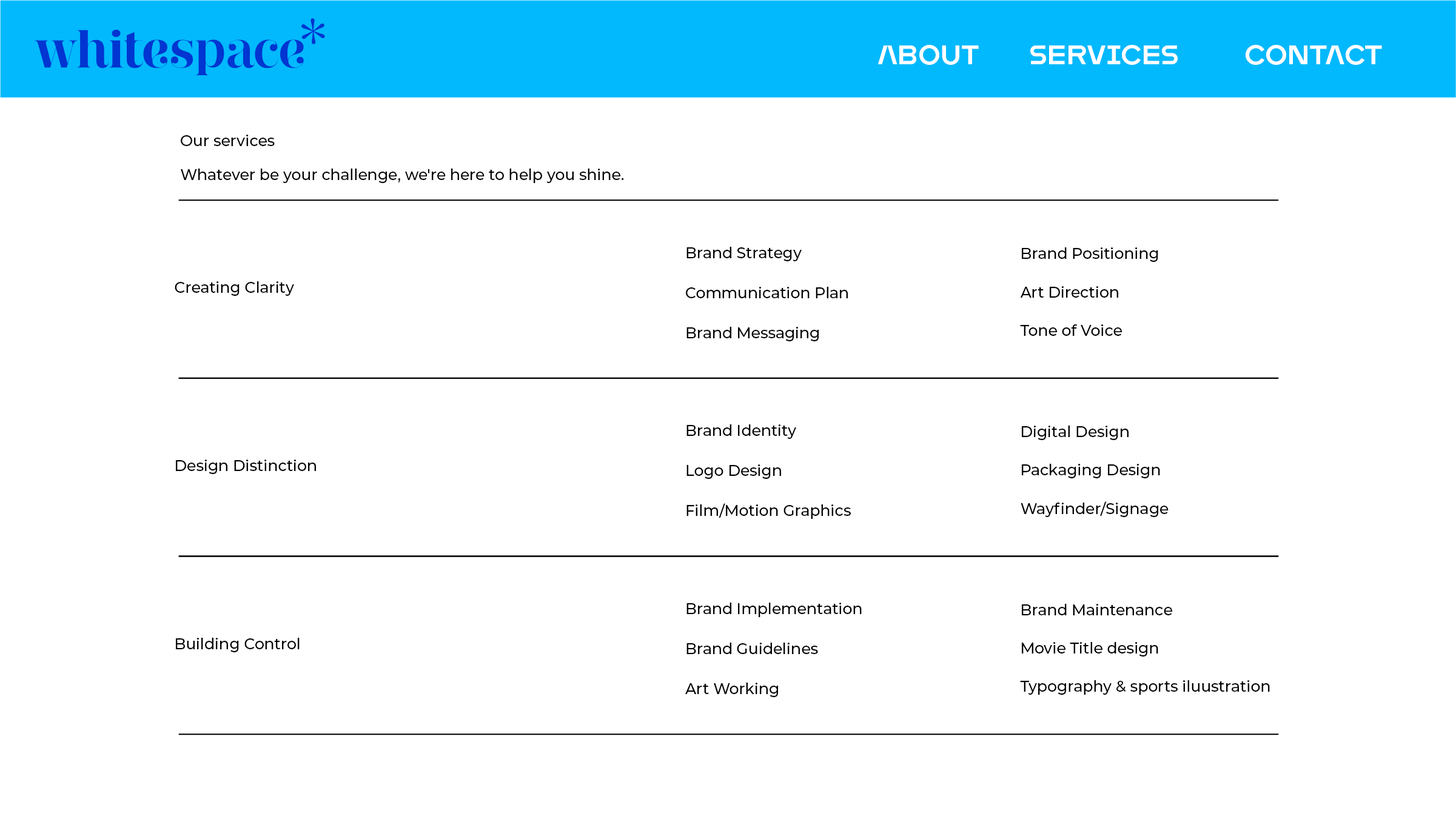
<style>
.page{position:relative;width:1456px;height:819px;background:#ffffff}
.page>*{position:absolute;margin:0}
.t1{font:27.2px "MonopolTRIAL-Regular";color:#ffffff}
.t2{font:15.2px/34.1px "Montserrat-Medium";color:#000000}
.t3{font:15.2px "Montserrat-Medium";color:#000000}
</style>
<div class="page">
<p class="t1" style="left:878px;top:45px;width:101px;height:20px">About</p>
<p class="t1" style="left:1030px;top:45px;width:147px;height:20px">Services</p>
<p class="t1" style="left:1245px;top:45px;width:137px;height:20px">Contact</p>
<p class="t2" style="left:181px;top:135px;width:443px;height:48px">Our services<br>Whatever be your challenge, we're here to help you shine.</p>
<p class="t3" style="left:686px;top:247px;width:116px;height:14px">Brand Strategy</p>
<p class="t3" style="left:1022px;top:247px;width:136px;height:15px">Brand Positioning</p>
<p class="t3" style="left:175px;top:281px;width:119px;height:15px">Creating Clarity</p>
<p class="t3" style="left:686px;top:287px;width:162px;height:11px">Communication Plan</p>
<p class="t3" style="left:1020px;top:286px;width:98px;height:12px">Art Direction</p>
<p class="t3" style="left:686px;top:327px;width:133px;height:14px">Brand Messaging</p>
<p class="t3" style="left:1020px;top:324px;width:102px;height:12px">Tone of Voice</p>
<p class="t3" style="left:686px;top:424px;width:110px;height:15px">Brand Identity</p>
<p class="t3" style="left:1022px;top:426px;width:106px;height:14px">Digital Design</p>
<p class="t3" style="left:176px;top:460px;width:140px;height:14px">Design Distinction</p>
<p class="t3" style="left:686px;top:464px;width:95px;height:15px">Logo Design</p>
<p class="t3" style="left:1022px;top:464px;width:138px;height:14px">Packaging Design</p>
<p class="t3" style="left:686px;top:503px;width:165px;height:16px">Film/Motion Graphics</p>
<p class="t3" style="left:1020px;top:501px;width:148px;height:16px">Wayfinder/Signage</p>
<p class="t3" style="left:686px;top:603px;width:176px;height:14px">Brand Implementation</p>
<p class="t3" style="left:1022px;top:604px;width:150px;height:11px">Brand Maintenance</p>
<p class="t3" style="left:176px;top:638px;width:124px;height:14px">Building Control</p>
<p class="t3" style="left:686px;top:643px;width:132px;height:11px">Brand Guidelines</p>
<p class="t3" style="left:1022px;top:642px;width:136px;height:15px">Movie Title design</p>
<p class="t3" style="left:685px;top:683px;width:93px;height:14px">Art Working</p>
<p class="t3" style="left:1020px;top:680px;width:250px;height:15px">Typography &amp; sports iluustration</p>
</div>
